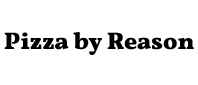
<style>
.page{position:relative;width:198px;height:85px;background:#ffffff}
.page>*{position:absolute;margin:0}
.t1{font:24px "Vollkorn-Bold";color:#000000}
</style>
<div class="page">
<p class="t1" style="left:4px;top:31px;width:190px;height:24px">Pizza by Reason</p>
</div>
